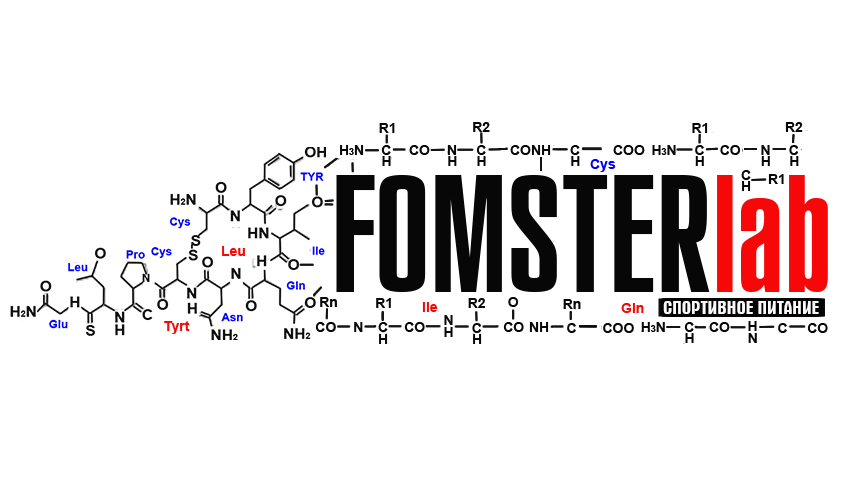
<style>
.page{position:relative;width:850px;height:500px;background:#ffffff}
.page>*{position:absolute;margin:0}
.t1{font:14px "Arial-BoldMT";color:#070707}
.t2{font:9px "Arial-BoldMT";color:#070707}
.t3{font:14px "Arial-BoldMT";color:#0000ff}
.t4{font:14px "Arial-BoldMT";color:#f70808}
.t5{font:14px "Arial-BoldMT";color:#0a0a0a}
.t6{font:18px "AAlterna";color:#fbf9f9}
</style>
<div class="page">
<p class="t1" style="left:379px;top:123px;width:16px;height:10px">R1</p>
<p class="t1" style="left:473px;top:122px;width:17px;height:10px">R2</p>
<p class="t1" style="left:692px;top:123px;width:16px;height:10px">R1</p>
<p class="t1" style="left:785px;top:122px;width:18px;height:10px">R2</p>
<p class="t1" style="left:340px;top:145px;width:24px;height:10px">H<span class="t2">3</span>N</p>
<p class="t1" style="left:381px;top:145px;width:10px;height:10px">C</p>
<p class="t1" style="left:409px;top:145px;width:21px;height:10px">CO</p>
<p class="t1" style="left:447px;top:145px;width:10px;height:10px">N</p>
<p class="t1" style="left:476px;top:145px;width:10px;height:10px">C</p>
<p class="t1" style="left:510px;top:145px;width:41px;height:10px">CONH</p>
<p class="t1" style="left:570px;top:145px;width:10px;height:10px">C</p>
<p class="t1" style="left:613px;top:145px;width:32px;height:10px">COO</p>
<p class="t1" style="left:652px;top:145px;width:24px;height:10px">H<span class="t2">3</span>N</p>
<p class="t1" style="left:695px;top:145px;width:9px;height:10px">C</p>
<p class="t1" style="left:720px;top:145px;width:21px;height:10px">CO</p>
<p class="t1" style="left:761px;top:145px;width:9px;height:10px">N</p>
<p class="t1" style="left:789px;top:145px;width:9px;height:10px">C</p>
<p class="t1" style="left:382px;top:156px;width:9px;height:10px">H</p>
<p class="t1" style="left:448px;top:156px;width:9px;height:10px">H</p>
<p class="t1" style="left:477px;top:156px;width:9px;height:10px">H</p>
<p class="t1" style="left:571px;top:156px;width:9px;height:10px">H</p>
<p class="t3" style="left:590px;top:159px;width:26px;height:13px">Cys</p>
<p class="t1" style="left:695px;top:156px;width:9px;height:10px">H</p>
<p class="t1" style="left:761px;top:156px;width:9px;height:10px">H</p>
<p class="t1" style="left:790px;top:156px;width:9px;height:10px">H</p>
<p class="t1" style="left:741px;top:170px;width:10px;height:10px">C</p>
<p class="t1" style="left:768px;top:174px;width:16px;height:10px">R1</p>
<p class="t1" style="left:742px;top:181px;width:9px;height:10px">H</p>
<p class="t4" style="left:222px;top:246px;width:23px;height:10px">Leu</p>
<p class="t1" style="left:320px;top:297px;width:17px;height:10px">Rn</p>
<p class="t1" style="left:376px;top:298px;width:15px;height:10px">R1</p>
<p class="t4" style="left:422px;top:302px;width:16px;height:10px">lle</p>
<p class="t1" style="left:468px;top:298px;width:17px;height:10px">R2</p>
<p class="t5" style="left:508px;top:297px;width:11px;height:10px">O</p>
<p class="t1" style="left:563px;top:299px;width:18px;height:10px">Rn</p>
<p class="t4" style="left:621px;top:303px;width:23px;height:10px">Gln</p>
<p class="t6" style="left:663px;top:301px;width:156px;height:13px">СПОРТИВНОЕ ПИТАНИЕ</p>
<p class="t1" style="left:444px;top:315px;width:9px;height:10px">N</p>
<p class="t4" style="left:164px;top:321px;width:26px;height:13px">Tyrt</p>
<p class="t1" style="left:315px;top:322px;width:21px;height:10px">CO</p>
<p class="t1" style="left:354px;top:322px;width:9px;height:10px">N</p>
<p class="t1" style="left:378px;top:322px;width:10px;height:10px">C</p>
<p class="t1" style="left:404px;top:322px;width:21px;height:10px">CO</p>
<p class="t1" style="left:444px;top:327px;width:9px;height:10px">H</p>
<p class="t1" style="left:472px;top:323px;width:9px;height:10px">C</p>
<p class="t1" style="left:503px;top:322px;width:21px;height:10px">CO</p>
<p class="t1" style="left:529px;top:322px;width:20px;height:10px">NH</p>
<p class="t1" style="left:567px;top:323px;width:9px;height:10px">C</p>
<p class="t1" style="left:603px;top:323px;width:31px;height:10px">COO</p>
<p class="t1" style="left:641px;top:322px;width:24px;height:10px">H<span class="t2">3</span>N</p>
<p class="t1" style="left:684px;top:322px;width:10px;height:10px">C</p>
<p class="t1" style="left:709px;top:322px;width:21px;height:10px">CO</p>
<p class="t1" style="left:748px;top:321px;width:9px;height:10px">H</p>
<p class="t1" style="left:778px;top:323px;width:9px;height:10px">C</p>
<p class="t1" style="left:807px;top:323px;width:21px;height:10px">CO</p>
<p class="t1" style="left:379px;top:334px;width:9px;height:10px">H</p>
<p class="t1" style="left:473px;top:334px;width:9px;height:10px">H</p>
<p class="t1" style="left:685px;top:333px;width:9px;height:10px">H</p>
<p class="t1" style="left:748px;top:333px;width:9px;height:10px">N</p>
</div>
